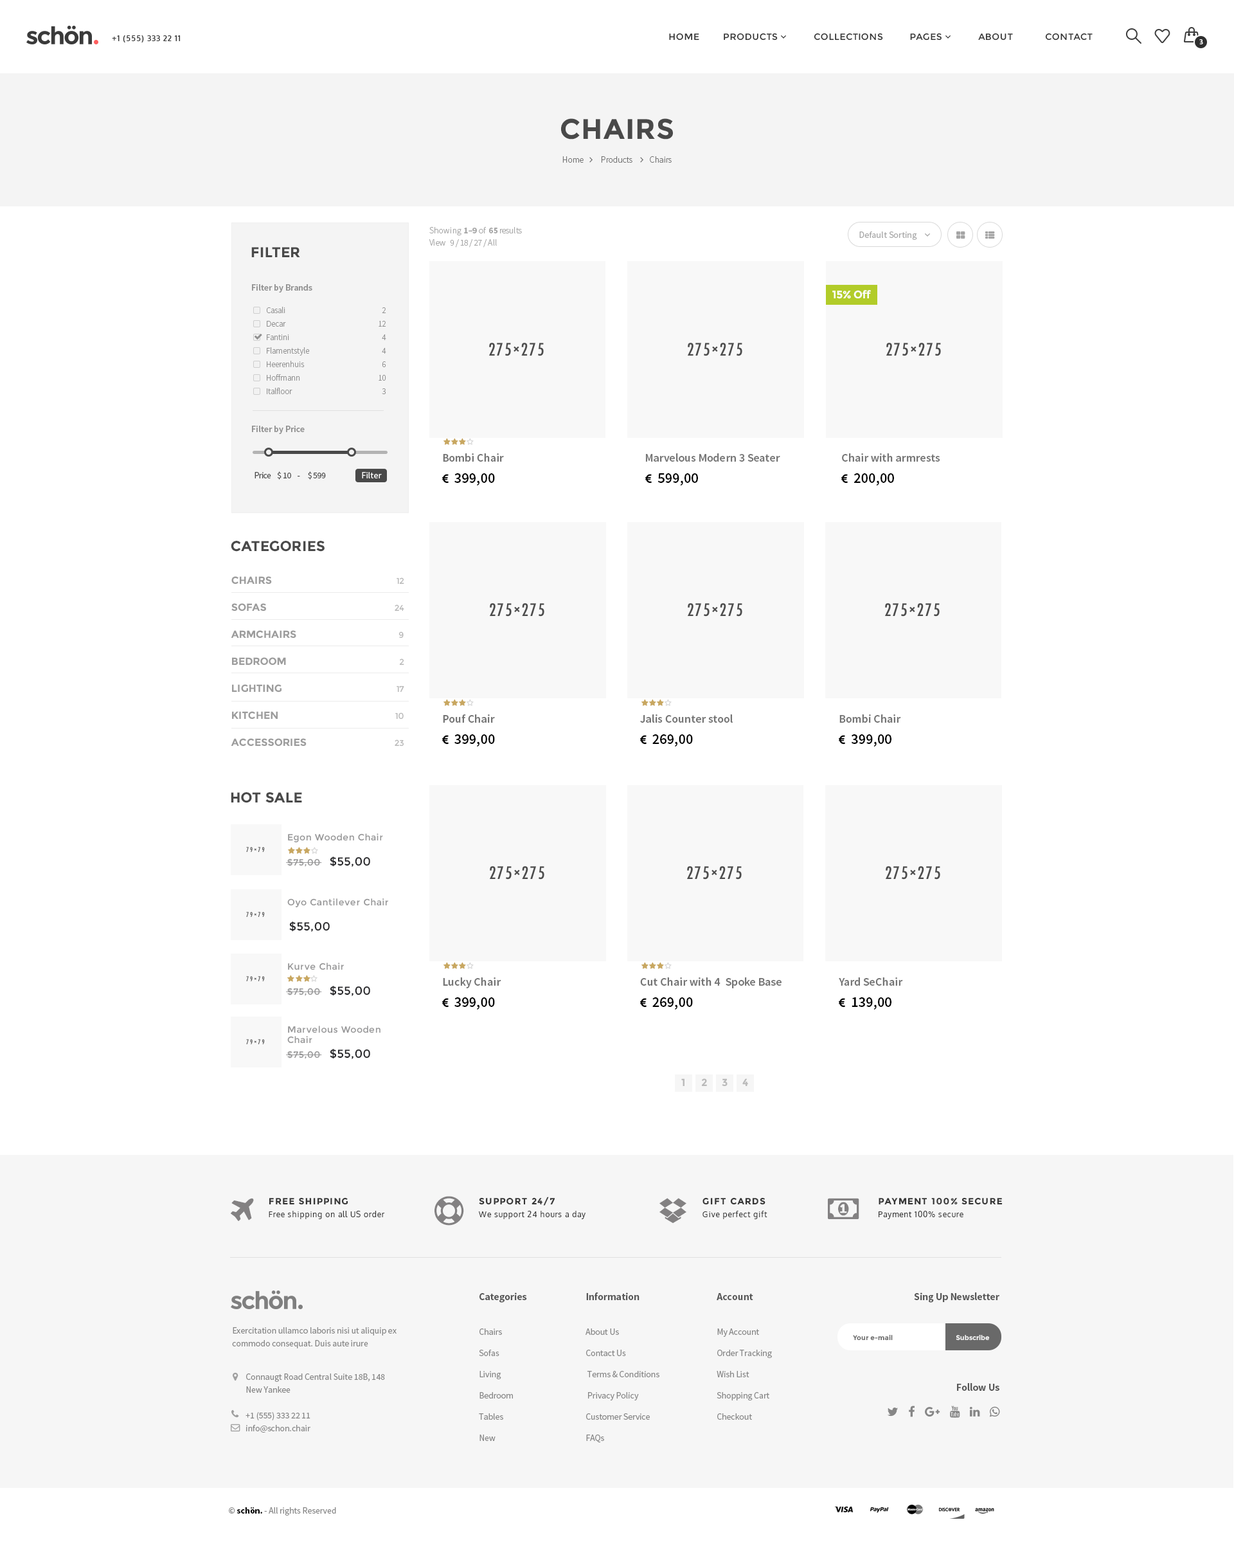
<style>
.page{position:relative;width:1234px;height:1567px;background:#ffffff}
.page>*{position:absolute;margin:0}
.t1{font:7.7px "Oxygen-Bold";letter-spacing:0.08em;color:#393939}
.t2{font:7.1px "MyriadPro-Semibold";letter-spacing:0.08em;color:#ffffff}
.t3{font:28.3px "Montserrat-Bold";letter-spacing:0.02em;color:#494949}
.t4{font:9px/12.3px "SourceSansPro-Light";letter-spacing:-0.02em;color:#a5a5a5}
.t5{font:9px/12.3px "SourceSansPro-Bold";letter-spacing:-0.02em;color:#a5a5a5}
.t6{font:14.3px "Montserrat-Bold";color:#494949}
.t7{font:9px "SourceSansPro-Semibold";color:#919191}
.t8{font:11px "Montserrat-Bold";letter-spacing:-0.04em;color:#ffffff}
.t9{font:8.4px "SourceSansPro-Light";color:#919191}
.t10{font:8.4px/13.5px "SourceSansPro-Light";color:#919191}
.t11{font:11.6px "SourceSansPro-Semibold";color:#747474}
.t12{font:11.6px "SourceSansPro-Semibold";color:#757575}
.t13{font:9px "SourceSansPro-Regular";letter-spacing:-0.04em;color:#494949}
.t14{font:9px "SourceSansPro-Regular";color:#ffffff}
.t15{font:10.3px/26.9px "Montserrat-Bold";color:#9c9c9c}
.t16{font:8.4px/26.9px "Montserrat-Regular";color:#b9b9b9}
.t17{font:9px "Montserrat-Regular";letter-spacing:0.04em;color:#959596}
.t18{font:11.6px "Montserrat-Regular";letter-spacing:0.04em;color:#252528}
.t19{font:9px/10.3px "Montserrat-Regular";letter-spacing:0.04em;color:#959596}
.t20{font:10.3px "Montserrat-Bold";color:#bababa}
.t21{font:9px "Montserrat-Bold";letter-spacing:0.08em;color:#353535}
.t22{font:7.7px "Oxygen-Regular";letter-spacing:0.08em;color:#353535}
.t23{font:10.3px "SourceSansPro-Bold";letter-spacing:-0.01em;color:#575757}
.t24{font:9px/12.9px "SourceSansPro-Regular";letter-spacing:-0.01em;color:#868686}
.t25{font:9px/21.2px "SourceSansPro-Regular";letter-spacing:-0.01em;color:#868686}
.t26{font:6.8px "Montserrat-Bold";color:#696969}
.t27{font:6.8px "Montserrat-Bold";color:#f6f6f6}
.t28{font:9px "SourceSansPro-Regular";letter-spacing:-0.01em;color:#868686}
.t29{font:9px "SourceSansPro-Bold";letter-spacing:-0.01em;color:#868686}
.t30{font:9px "SourceSansPro-Bold";letter-spacing:-0.01em;color:#000000}
</style>
<div class="page">
<p class="t1" style="left:112px;top:35px;width:69px;height:7px">+1 (555) 333 22 11</p>
<p class="t2" style="left:1200px;top:39px;width:3px;height:5px">3</p>
<p class="t3" style="left:561px;top:118px;width:112px;height:21px">CHAIRS</p>
<p class="t4" style="left:429px;top:227px;width:93px;height:20px">Showing  <span class="t5">1–9</span> of  <span class="t5">65 </span>results<br>View   9 / 18 / 27 / All</p>
<p class="t6" style="left:251px;top:247px;width:49px;height:10px">FILTER</p>
<p class="t7" style="left:252px;top:284px;width:60px;height:8px">Filter by Brands</p>
<p class="t8" style="left:832px;top:290px;width:39px;height:9px">15% Off</p>
<p class="t9" style="left:266px;top:307px;width:19px;height:6px">Casali</p>
<p class="t10" style="left:379px;top:307px;width:7px;height:87px;text-align:right">2<br>12<br>4<br>4<br>6<br>10<br>3</p>
<p class="t9" style="left:267px;top:321px;width:19px;height:6px">Decar</p>
<p class="t9" style="left:267px;top:334px;width:22px;height:6px">Fantini</p>
<p class="t9" style="left:267px;top:347px;width:43px;height:8px">Flamentstyle</p>
<p class="t9" style="left:267px;top:361px;width:38px;height:6px">Heerenhuis</p>
<p class="t9" style="left:267px;top:374px;width:33px;height:7px">Hoffmann</p>
<p class="t9" style="left:267px;top:388px;width:25px;height:6px">Italfloor</p>
<p class="t7" style="left:252px;top:426px;width:53px;height:8px">Filter by Price</p>
<p class="t11" style="left:443px;top:453px;width:61px;height:9px">Bombi Chair</p>
<p class="t12" style="left:645px;top:453px;width:135px;height:9px">Marvelous Modern 3 Seater</p>
<p class="t12" style="left:842px;top:453px;width:98px;height:9px">Chair with armrests</p>
<p class="t13" style="left:255px;top:471px;width:71px;height:9px">Price    $ 10    -     $ 599</p>
<p class="t14" style="left:362px;top:472px;width:20px;height:6px">Filter</p>
<p class="t6" style="left:231px;top:541px;width:94px;height:11px">CATEGORIES</p>
<p class="t15" style="left:231px;top:576px;width:76px;height:170px">CHAIRS<br>SOFAS<br>ARMCHAIRS<br>BEDROOM<br>LIGHTING<br>KITCHEN<br>ACCESSORIES</p>
<p class="t16" style="left:395px;top:577px;width:9px;height:169px;text-align:right">12<br>24<br>9<br>2<br>17<br>10<br>23</p>
<p class="t11" style="left:443px;top:714px;width:52px;height:9px">Pouf Chair</p>
<p class="t11" style="left:640px;top:714px;width:93px;height:9px">Jalis Counter stool</p>
<p class="t11" style="left:840px;top:714px;width:61px;height:9px">Bombi Chair</p>
<p class="t6" style="left:231px;top:792px;width:71px;height:11px">HOT SALE</p>
<p class="t17" style="left:288px;top:833px;width:95px;height:10px">Egon Wooden Chair</p>
<p class="t18" style="left:330px;top:856px;width:40px;height:11px">$55,00</p>
<p class="t17" style="left:287px;top:858px;width:33px;height:9px">$75,00</p>
<p class="t17" style="left:287px;top:898px;width:101px;height:10px">Oyo Cantilever Chair</p>
<p class="t18" style="left:289px;top:921px;width:41px;height:10px">$55,00</p>
<p class="t17" style="left:288px;top:962px;width:56px;height:8px">Kurve Chair</p>
<p class="t11" style="left:443px;top:977px;width:58px;height:11px">Lucky Chair</p>
<p class="t11" style="left:640px;top:977px;width:142px;height:11px">Cut Chair with 4  Spoke Base</p>
<p class="t11" style="left:839px;top:977px;width:64px;height:8px">Yard SeChair</p>
<p class="t17" style="left:287px;top:987px;width:33px;height:9px">$75,00</p>
<p class="t18" style="left:330px;top:985px;width:40px;height:11px">$55,00</p>
<p class="t19" style="left:287px;top:1025px;width:94px;height:18px">Marvelous Wooden<br>Chair</p>
<p class="t18" style="left:330px;top:1048px;width:40px;height:11px">$55,00</p>
<p class="t17" style="left:287px;top:1050px;width:33px;height:9px">$75,00</p>
<p class="t20" style="left:681px;top:1078px;width:4px;height:8px">1</p>
<p class="t20" style="left:701px;top:1078px;width:6px;height:8px">2</p>
<p class="t20" style="left:722px;top:1078px;width:6px;height:8px">3</p>
<p class="t20" style="left:742px;top:1078px;width:6px;height:8px">4</p>
<p class="t21" style="left:269px;top:1197px;width:79px;height:8px">FREE SHIPPING</p>
<p class="t21" style="left:479px;top:1196px;width:76px;height:9px">SUPPORT 24/7</p>
<p class="t21" style="left:703px;top:1197px;width:63px;height:8px">GIFT CARDS</p>
<p class="t21" style="left:879px;top:1197px;width:124px;height:8px">PAYMENT 100% SECURE</p>
<p class="t22" style="left:269px;top:1210px;width:116px;height:9px">Free shipping on all US order</p>
<p class="t22" style="left:478px;top:1210px;width:108px;height:9px">We support 24 hours a day</p>
<p class="t22" style="left:703px;top:1210px;width:65px;height:9px">Give perfect gift</p>
<p class="t22" style="left:879px;top:1210px;width:85px;height:9px">Payment 100% secure</p>
<p class="t23" style="left:480px;top:1292px;width:47px;height:10px">Categories</p>
<p class="t23" style="left:586px;top:1292px;width:54px;height:8px">Information</p>
<p class="t23" style="left:717px;top:1293px;width:36px;height:7px">Account</p>
<p class="t23" style="left:914px;top:1292px;width:86px;height:10px">Sing Up Newsletter</p>
<p class="t24" style="left:232px;top:1327px;width:165px;height:21px">Exercitation ullamco laboris nisi ut aliquip ex<br>commodo consequat. Duis aute irure</p>
<p class="t25" style="left:479px;top:1328px;width:34px;height:113px">Chairs<br>Sofas<br>Living<br>Bedroom<br>Tables<br>New</p>
<p class="t25" style="left:586px;top:1328px;width:74px;height:115px">About Us<br>Contact Us<br> Terms &amp; Conditions<br> Privacy Policy<br>Customer Service<br>FAQs</p>
<p class="t25" style="left:717px;top:1328px;width:55px;height:91px">My Account<br>Order Tracking<br>Wish List<br>Shopping Cart<br>Checkout</p>
<p class="t26" style="left:853px;top:1335px;width:40px;height:5px">Your e-mail</p>
<p class="t27" style="left:956px;top:1335px;width:34px;height:5px">Subscribe</p>
<p class="t24" style="left:246px;top:1373px;width:139px;height:59px">Connaugt Road Central Suite 18B, 148<br>New Yankee<br><br>+1 (555) 333 22 11<br>info@schon.chair</p>
<p class="t23" style="left:957px;top:1383px;width:43px;height:7px">Follow Us</p>
<p class="t28" style="left:229px;top:1507px;width:107px;height:8px"><span class="t29">©</span><span class="t30"> schön. </span>- All rights Reserved</p>
</div>
